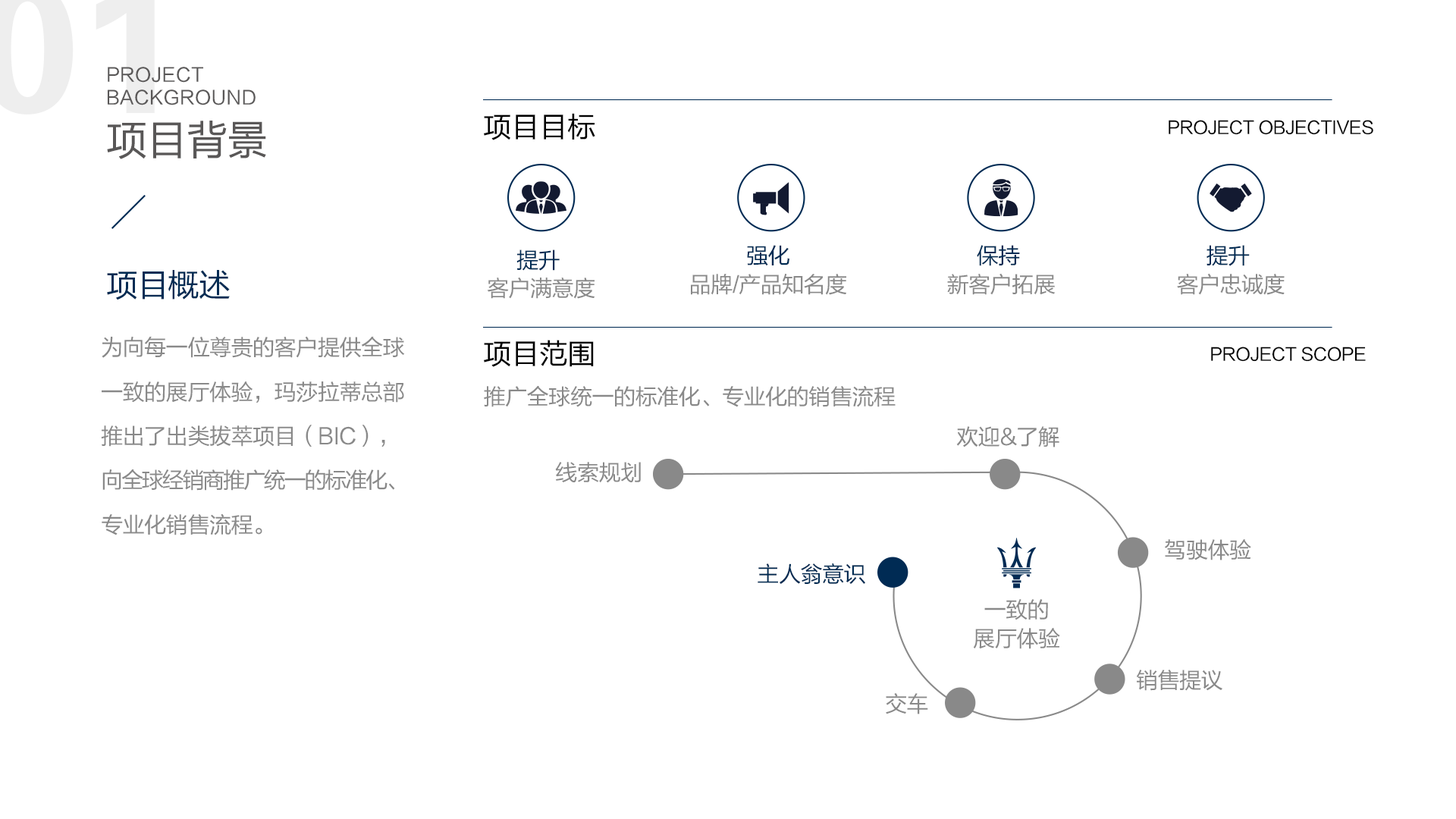
<style>
.page{position:relative;width:1456px;height:819px;background:#ffffff}
.page>*{position:absolute;margin:0}
.t1{font:18.8px "FZLTHJW--GB1-0";letter-spacing:0.02em;color:#595757}
.t2{font:28.4px "FZLTHJW--GB1-0";letter-spacing:-0.02em;color:#000000}
.t3{font:41.1px "FZLTHJW--GB1-0";letter-spacing:-0.02em;color:#595757}
.t4{font:17.5px "FZLTHJW--GB1-0";letter-spacing:-0.02em;color:#000000}
.t5{font:22.1px/28.4px "FZLTHJW--GB1-0";letter-spacing:-0.02em;color:#898989}
.t6{font:22.1px/28.4px "FZLTHJW--GB1-0";letter-spacing:-0.02em;color:#002c54}
.t7{font:31.6px "FZLTHJW--GB1-0";letter-spacing:-0.02em;color:#002c54}
.t8{font:22.1px/44.2px "FZLTHJW--GB1-0";letter-spacing:-0.02em;color:#898989}
.t9{font:22.1px/44.2px "FZLTHJW--GB1-0";letter-spacing:-0.08em;color:#898989}
.t10{font:22.1px "FZLTHJW--GB1-0";letter-spacing:-0.02em;color:#898989}
.t11{font:22.1px "FZLTHJW--GB1-0";letter-spacing:-0.02em;color:#002c54}
</style>
<div class="page">
<p class="t1" style="left:107px;top:67px;width:149px;height:38px">PROJECT <br>BACKGROUND</p>
<p class="t2" style="left:484px;top:113px;width:111px;height:27px">项目目标</p>
<p class="t3" style="left:107px;top:121px;width:159px;height:38px">项目背景</p>
<p class="t4" style="left:1169px;top:120px;width:204px;height:15px">PROJECT OBJECTIVES</p>
<p class="t5" style="left:691px;top:245px;width:155px;height:50px;text-align:center"><span class="t6">强化</span> <br>品牌/产品知名度</p>
<p class="t5" style="left:947px;top:245px;width:109px;height:50px;text-align:center"><span class="t6">保持 <br></span>新客户拓展</p>
<p class="t5" style="left:1177px;top:245px;width:108px;height:50px;text-align:center"><span class="t6">提升 <br></span>客户忠诚度</p>
<p class="t5" style="left:488px;top:249px;width:107px;height:50px;text-align:center"><span class="t6">提升</span> <br>客户满意度</p>
<p class="t7" style="left:107px;top:270px;width:123px;height:30px">项目概述</p>
<p class="t8" style="left:101px;top:336px;width:303px;height:199px">为向每一位尊贵的客户提供全球一致的展厅体验，玛莎拉蒂总部推出了出类拔萃项目（BIC），<span class="t9">向全球经销商推广统一的标准化、</span>专业化销售流程。</p>
<p class="t2" style="left:484px;top:340px;width:110px;height:27px">项目范围</p>
<p class="t4" style="left:1211px;top:347px;width:155px;height:15px">PROJECT SCOPE</p>
<p class="t10" style="left:484px;top:385px;width:412px;height:22px">推广全球统一的标准化、专业化的销售流程</p>
<p class="t10" style="left:956px;top:426px;width:103px;height:21px">欢迎&amp;了解</p>
<p class="t10" style="left:555px;top:462px;width:86px;height:21px">线索规划</p>
<p class="t10" style="left:1165px;top:539px;width:86px;height:21px">驾驶体验</p>
<p class="t11" style="left:758px;top:563px;width:107px;height:21px">主人翁意识</p>
<p class="t5" style="left:973px;top:599px;width:87px;height:50px;text-align:center">一致的<br>展厅体验</p>
<p class="t10" style="left:1137px;top:670px;width:85px;height:21px">销售提议</p>
<p class="t10" style="left:886px;top:693px;width:42px;height:21px">交车</p>
</div>
